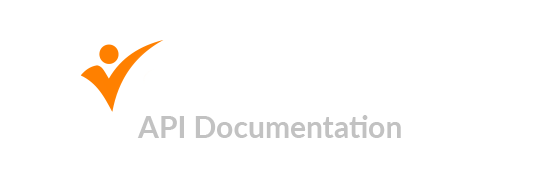
<style>
.page{position:relative;width:540px;height:178px;background:#ffffff}
.page>*{position:absolute;margin:0}
.t1{font:30px "Lato-Bold";color:#c2c2c2}
</style>
<div class="page">
<p class="t1" style="left:137px;top:115px;width:264px;height:23px">API Documentation</p>
</div>
